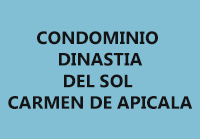
<style>
.page{position:relative;width:200px;height:139px;background:#82bed4}
.page>*{position:absolute;margin:0}
.t1{font:18px "SegoeUI-Bold";color:#141414}
</style>
<div class="page">
<p class="t1" style="left:8px;top:31px;width:185px;height:78px;text-align:center">CONDOMINIO <br>DINASTIA<br>DEL SOL <br>CARMEN DE APICALA</p>
</div>
